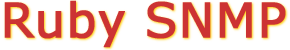
<style>
.page{position:relative;width:290px;height:50px;background:#ffffff}
.page>*{position:absolute;margin:0}
.t1{font:47.8px "Verdana";color:#cc3333;font-weight:bold}
</style>
<div class="page">
<p class="t1" style="left:4px;top:0px;width:282px;height:48px">Ruby SNMP</p>
</div>
